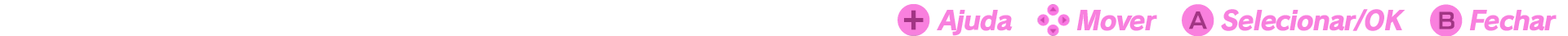
<style>
.page{position:relative;width:1568px;height:36px;background:#ffffff}
.page>*{position:absolute;margin:0}
.t1{font:26.1px "RodinPro-EB";letter-spacing:-0.046em;color:#f880de;font-style:italic}
</style>
<div class="page">
<p class="t1" style="left:937px;top:10px;width:76px;height:26px">Ajuda</p>
<p class="t1" style="left:1076px;top:10px;width:81px;height:21px">Mover</p>
<p class="t1" style="left:1221px;top:9px;width:184px;height:22px">Selecionar/OK</p>
<p class="t1" style="left:1469px;top:10px;width:88px;height:21px">Fechar</p>
</div>
